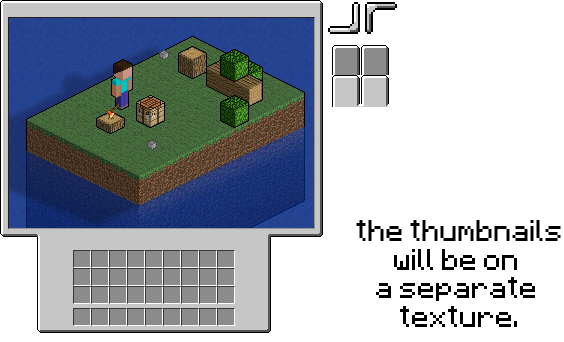
<style>
.page{position:relative;width:564px;height:342px;background:#ffffff}
.page>*{position:absolute;margin:0}
.t1{font:24px "Minecraftia-Regular";color:#000000}
</style>
<div class="page">
<p class="t1" style="left:356px;top:220px;width:205px;height:107px;text-align:center">the thumbnails<br>will be on <br>a separate <br>texture.</p>
</div>
